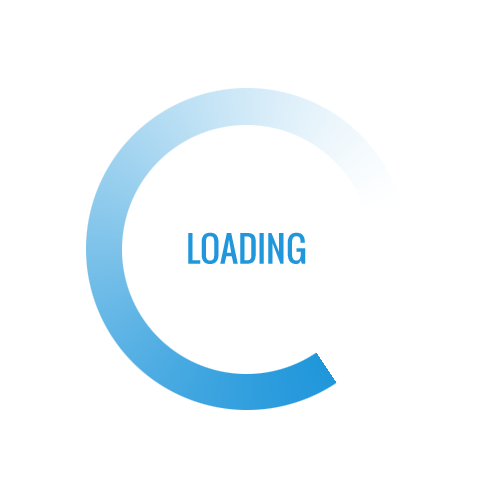
<style>
.page{position:relative;width:500px;height:500px;background:#ffffff}
.page>*{position:absolute;margin:0}
.t1{font:35px "Oswald-Regular";color:#2197db}
</style>
<div class="page">
<p class="t1" style="left:188px;top:232px;width:118px;height:32px">LOADING</p>
</div>
